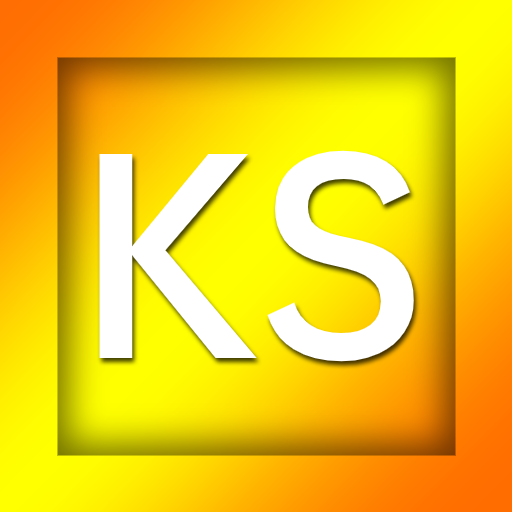
<style>
.page{position:relative;width:512px;height:512px}
.page>*{position:absolute;margin:0}
.t1{font:250px "OPPOSans-B";color:#ffffff}
</style>
<div class="page">
<p class="t1" style="left:99px;top:150px;width:315px;height:212px">KS</p>
</div>
